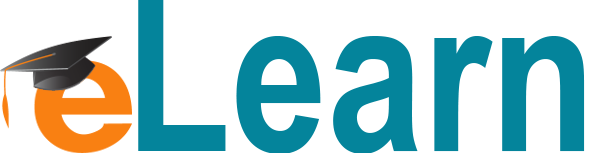
<style>
.page{position:relative;width:600px;height:153px;background:#ffffff}
.page>*{position:absolute;margin:0}
.t1{font:216px "Arial-BoldMT";color:#04849b;scale:0.8 1}
</style>
<div class="page">
<p class="t1" style="left:138px;top:0px;width:447px;height:154px">Learn</p>
</div>
